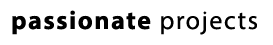
<style>
.page{position:relative;width:273px;height:45px;background:#ffffff}
.page>*{position:absolute;margin:0}
.t1{font:26px "MyriadPro-Bold";letter-spacing:0.06em;color:#000000}
.t2{font:26px "MyriadPro-Regular";letter-spacing:0.06em;color:#000000}
</style>
<div class="page">
<p class="t1" style="left:12px;top:10px;width:245px;height:25px">passionate<span class="t2"> projects</span></p>
</div>
